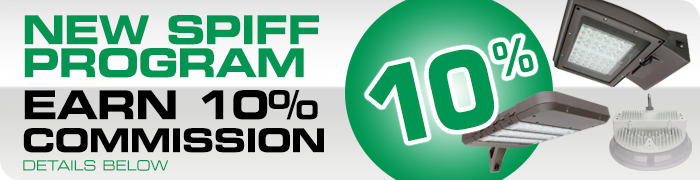
<style>
.page{position:relative;width:700px;height:180px}
.page>*{position:absolute;margin:0}
.t1{font:40.1px/33px "Eurostile-BoldExtendedTwo";letter-spacing:-0.03em;color:#009553;text-transform:uppercase;scale:0.95 1}
.t2{font:40.1px/42px "Eurostile-BoldExtendedTwo";letter-spacing:-0.03em;color:#000000;text-transform:uppercase;scale:0.95 1}
.t3{font:33.1px/33px "Eurostile-BoldExtendedTwo";letter-spacing:-0.03em;color:#000000;text-transform:uppercase;scale:0.95 1}
.t4{font:14.1px/18.1px "Eurostile-ExtendedTwo";letter-spacing:-0.03em;color:#009553;scale:0.95 1}
.t5{font:102.8px "Eurostile-Bold";letter-spacing:-0.03em;color:#009553;text-transform:uppercase;scale:0.91 1}
.t6{font:46.3px "Eurostile-Bold";letter-spacing:-0.03em;color:#009553;text-transform:uppercase;scale:0.91 1}
</style>
<div class="page">
<p class="t1" style="left:23px;top:15px;width:301px;height:156px">NEW SPIFF<br>PROGRAM<br><span class="t2">EARN 10%<br></span><span class="t3">Commission <br></span><span class="t4">DETAILS BELOW</span></p>
<p class="t5" style="left:368px;top:37px;width:166px;height:105px;rotate:-13deg">10<span class="t6">%</span></p>
</div>
